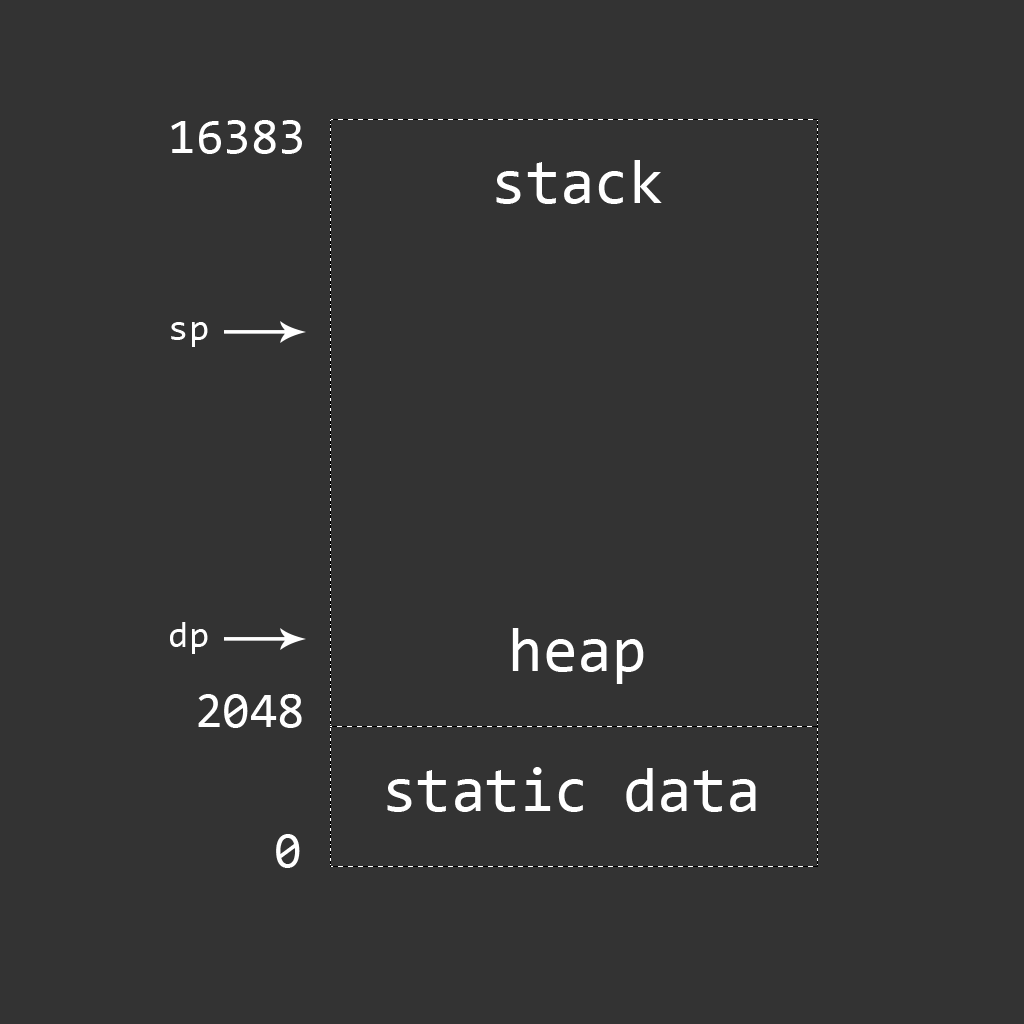
<style>
.page{position:relative;width:1024px;height:1024px;background:#333333}
.page>*{position:absolute;margin:0}
.t1{font:50px "Consolas";color:#ffffff}
.t2{font:62.5px "Consolas";color:#ffffff}
.t3{font:37.3px "Consolas";color:#ffffff}
</style>
<div class="page">
<p class="t1" style="left:171px;top:120px;width:131px;height:34px">16383</p>
<p class="t2" style="left:496px;top:160px;width:166px;height:44px">stack</p>
<p class="t3" style="left:171px;top:322px;width:37px;height:25px">sp</p>
<p class="t3" style="left:170px;top:622px;width:38px;height:32px">dp</p>
<p class="t2" style="left:512px;top:628px;width:132px;height:56px">heap</p>
<p class="t1" style="left:198px;top:694px;width:104px;height:34px">2048</p>
<p class="t2" style="left:387px;top:767px;width:369px;height:45px">static data</p>
<p class="t1" style="left:276px;top:834px;width:24px;height:34px">0</p>
</div>
